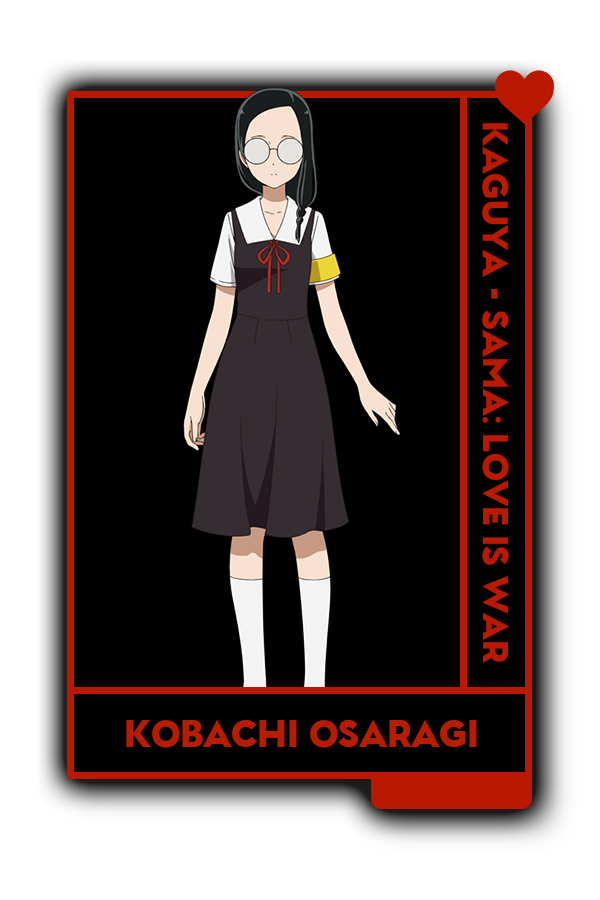
<style>
.page{position:relative;width:600px;height:900px;background:#000000}
.page>*{position:absolute;margin:0}
.t1{font:34px "GarnetCapitalsBlack-Regular";color:#b52616}
.t2{font:35.7px "GarnetCapitalsBlack-Regular";color:#b22818}
</style>
<div class="page">
<p class="t1" style="left:482px;top:123px;width:27px;height:540px;rotate:90deg">Kaguya - Sama: Love is war</p>
<p class="t2" style="left:126px;top:720px;width:351px;height:28px">Kobachi Osaragi</p>
</div>
